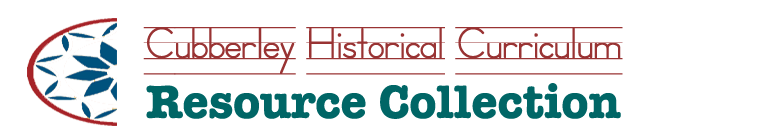
<style>
.page{position:relative;width:774px;height:134px;background:#ffffff}
.page>*{position:absolute;margin:0}
.t1{font:48px "SchoolHousePrintedA";color:#993333}
.t2{font:48px "AmericanTypewriter-Bold";color:#006666}
.t3{font:48px "SnellRoundhand-Bold";color:#006666}
</style>
<div class="page">
<p class="t1" style="left:143px;top:27px;width:480px;height:48px">Cubberley Historical Curriculum</p>
<p class="t2" style="left:146px;top:83px;width:475px;height:36px"><span class="t3"> </span>Resource Collection</p>
</div>
